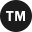
<style>
.page{position:relative;width:32px;height:32px;background:#1c1c1c}
.page>*{position:absolute;margin:0}
.t1{font:25px "FranklinGothicURW-Med";letter-spacing:0.075em;color:#ffffff}
</style>
<div class="page">
<p class="t1" style="left:6px;top:11px;width:19px;height:10px">TM</p>
</div>
